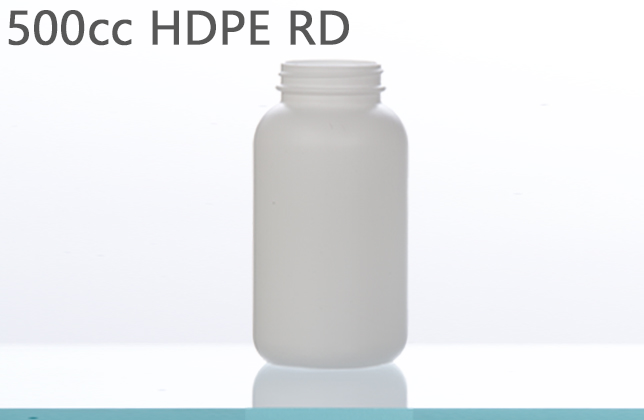
<style>
.page{position:relative;width:644px;height:420px}
.page>*{position:absolute;margin:0}
.t1{font:48px "Gadugi";color:#575757;font-weight:bold}
</style>
<div class="page">
<p class="t1" style="left:8px;top:10px;width:341px;height:36px">500cc HDPE RD</p>
</div>
